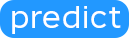
<style>
.page{position:relative;width:129px;height:38px;background:#2298ff}
.page>*{position:absolute;margin:0}
.t1{font:31.6px "BuilderSans-Regular";letter-spacing:0.02em;color:#ffffff;scale:1.05 1}
</style>
<div class="page">
<p class="t1" style="left:12px;top:6px;width:109px;height:28px">predict</p>
</div>
